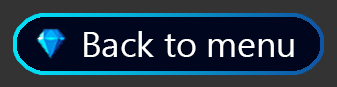
<style>
.page{position:relative;width:337px;height:87px;background:#00061d}
.page>*{position:absolute;margin:0}
.t1{font:35.4px "MyanmarText";color:#ffffff}
</style>
<div class="page">
<p class="t1" style="left:84px;top:31px;width:210px;height:26px">Back to menu</p>
</div>
